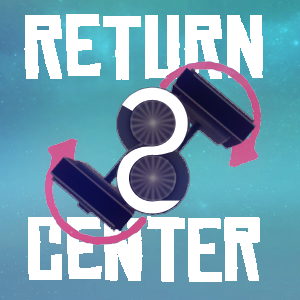
<style>
.page{position:relative;width:300px;height:300px;background:#ffffff}
.page>*{position:absolute;margin:0}
.t1{font:84.7px "ChineseRocksRg-Regular";color:#ffffff;font-weight:bold}
</style>
<div class="page">
<p class="t1" style="left:24px;top:14px;width:239px;height:268px;text-align:center">Return<br><br>Center</p>
</div>
